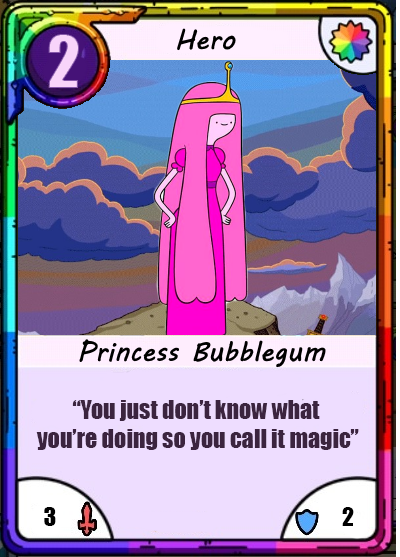
<style>
.page{position:relative;width:400px;height:557px}
.page>*{position:absolute;margin:0}
.t1{font:66.7px "Impact";color:#f8d4fa}
.t2{font:24px "Impact";color:#3b243f}
.t3{font:24px "Impact";color:#000000}
</style>
<div class="page">
<p class="t1" style="left:48px;top:34px;width:31px;height:54px">2</p>
<p class="t2" style="left:36px;top:400px;width:323px;height:50px;text-align:center">“You just don’t know what <br>you’re doing so you call it magic”</p>
<p class="t3" style="left:44px;top:507px;width:12px;height:19px">3</p>
<p class="t3" style="left:342px;top:507px;width:12px;height:19px">2</p>
</div>
